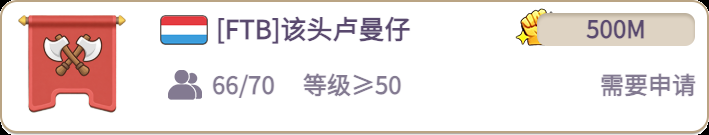
<style>
.page{position:relative;width:709px;height:135px;background:#ffffff}
.page>*{position:absolute;margin:0}
.t1{font:26px "WebPSD-18463539-0-Regular";color:#59496e;font-weight:bold}
.t2{font:24px "WebPSD-18463539-0-Regular";color:#59496e;font-weight:bold}
.t3{font:24px "WebPSD-18463539-0-Regular";color:#837a91;font-weight:bold}
</style>
<div class="page">
<p class="t1" style="left:216px;top:13px;width:280px;height:32px">[FTB]该头卢曼仔</p>
<p class="t2" style="left:537px;top:13px;width:158px;height:33px">500M</p>
<p class="t3" style="left:212px;top:72px;width:80px;height:26px">66/70</p>
<p class="t3" style="left:303px;top:72px;width:120px;height:26px">等级≥50</p>
<p class="t3" style="left:500px;top:72px;width:196px;height:26px">需要申请</p>
</div>
